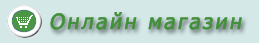
<style>
.page{position:relative;width:259px;height:43px;background:#d4e8e8}
.page>*{position:absolute;margin:0}
.t1{font:21px "Tahoma";letter-spacing:0.099em;color:#43903a;font-weight:bold;font-style:italic}
</style>
<div class="page">
<p class="t1" style="left:50px;top:12px;width:192px;height:18px">Онлайн магазин</p>
</div>
